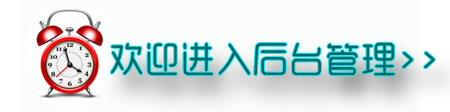
<style>
.page{position:relative;width:450px;height:112px;background:#fbfdfd}
.page>*{position:absolute;margin:0}
.t1{font:36px "MFYueYuan_Noncommercial-Regular";color:#036a6a}
</style>
<div class="page">
<p class="t1" style="left:110px;top:42px;width:325px;height:34px">欢迎进入后台管理&gt;&gt;</p>
</div>
